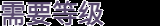
<style>
.page{position:relative;width:160px;height:26px;background:#000000}
.page>*{position:absolute;margin:0}
.t1{font:26px "WebPSD-18463539-0-Regular";color:#59496e;font-weight:bold}
</style>
<div class="page">
<p class="t1" style="left:0px;top:0px;width:160px;height:26px">需要等级</p>
</div>
